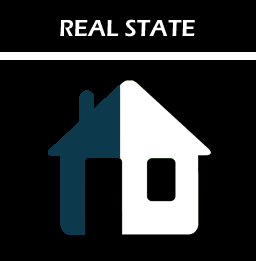
<style>
.page{position:relative;width:256px;height:261px;background:#000000}
.page>*{position:absolute;margin:0}
.t1{font:24px "ErasITC-Demi";color:#ffffff;text-transform:uppercase}
</style>
<div class="page">
<p class="t1" style="left:60px;top:19px;width:135px;height:18px">REAL STATE</p>
</div>
